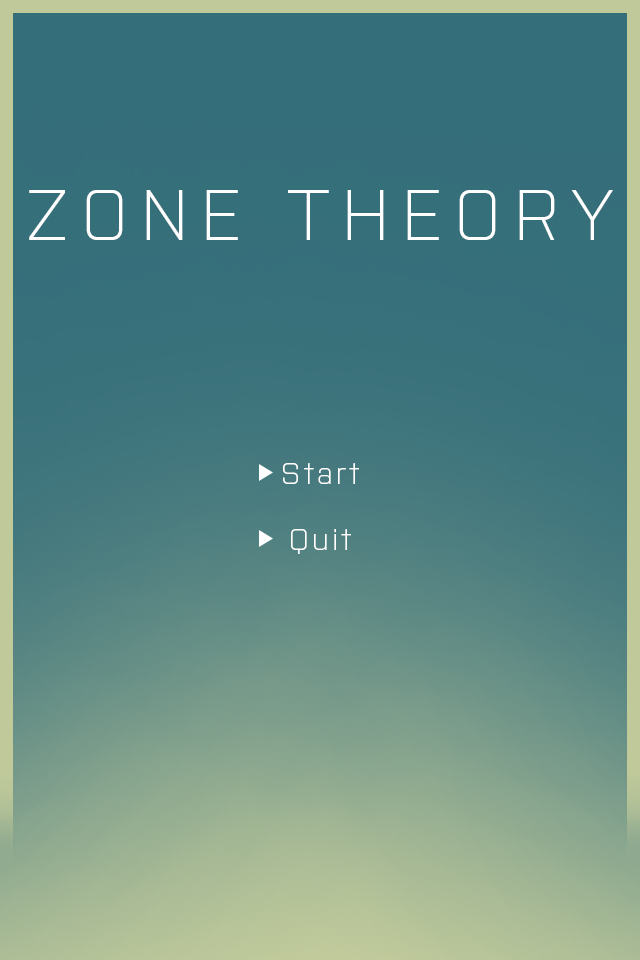
<style>
.page{position:relative;width:640px;height:960px}
.page>*{position:absolute;margin:0}
.t1{font:72px "Purista-Light";letter-spacing:0.18em;color:#ffffff}
.t2{font:30px "Purista-Light";letter-spacing:0.12em;color:#ffffff}
</style>
<div class="page">
<p class="t1" style="left:29px;top:190px;width:584px;height:50px">ZONE THEORY</p>
<p class="t2" style="left:283px;top:463px;width:76px;height:21px">Start</p>
<p class="t2" style="left:291px;top:529px;width:60px;height:25px">Quit</p>
</div>
